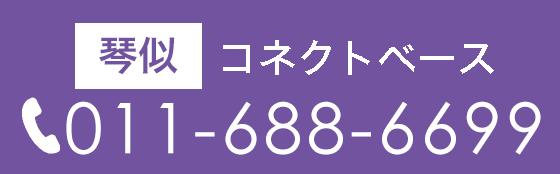
<style>
.page{position:relative;width:560px;height:174px;background:#7153a0}
.page>*{position:absolute;margin:0}
.t1{font:40px "HiraKakuStd-W6";color:#7153a0}
.t2{font:40px "HiraKakuStd-W5";color:#ffffff}
.t3{font:70px "CenturyGothic";letter-spacing:0.06em;color:#ffffff}
</style>
<div class="page">
<p class="t1" style="left:99px;top:36px;width:79px;height:39px">琴似</p>
<p class="t2" style="left:223px;top:40px;width:271px;height:35px">コネクトベース</p>
<p class="t3" style="left:66px;top:101px;width:475px;height:54px">011-688-6699</p>
</div>
